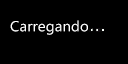
<style>
.page{position:relative;width:128px;height:64px;background:#000000}
.page>*{position:absolute;margin:0}
.t1{font:14.5px "Ebrima";letter-spacing:0.005em;color:#ffffff;scale:1.04 1}
</style>
<div class="page">
<p class="t1" style="left:10px;top:20px;width:78px;height:15px">Carregando</p>
</div>
